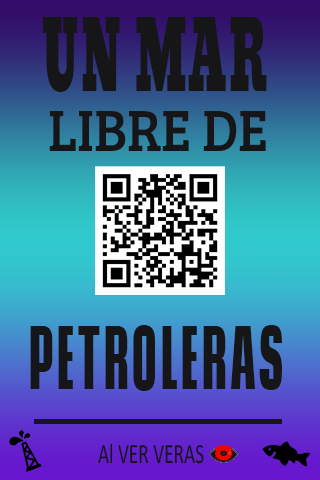
<style>
.page{position:relative;width:320px;height:480px}
.page>*{position:absolute;margin:0}
.t1{font:95.6px "Moul-Regular";letter-spacing:0.04em;color:#161618;scale:0.46 1}
.t2{font:60px "BreeSerif-Regular";color:#161618;scale:0.91 1}
.t3{font:81px "CodaCaption-ExtraBold";color:#161618;scale:0.44 1}
.t4{font:28.1px "Calibri";color:#161618;scale:0.69 1}
</style>
<div class="page">
<p class="t1" style="left:42px;top:17px;width:225px;height:75px">UN MAR</p>
<p class="t2" style="left:49px;top:111px;width:217px;height:40px">LIBRE DE</p>
<p class="t3" style="left:30px;top:325px;width:252px;height:66px">PETROLERAS</p>
<p class="t4" style="left:98px;top:443px;width:106px;height:21px">Al VER VERAS</p>
</div>
